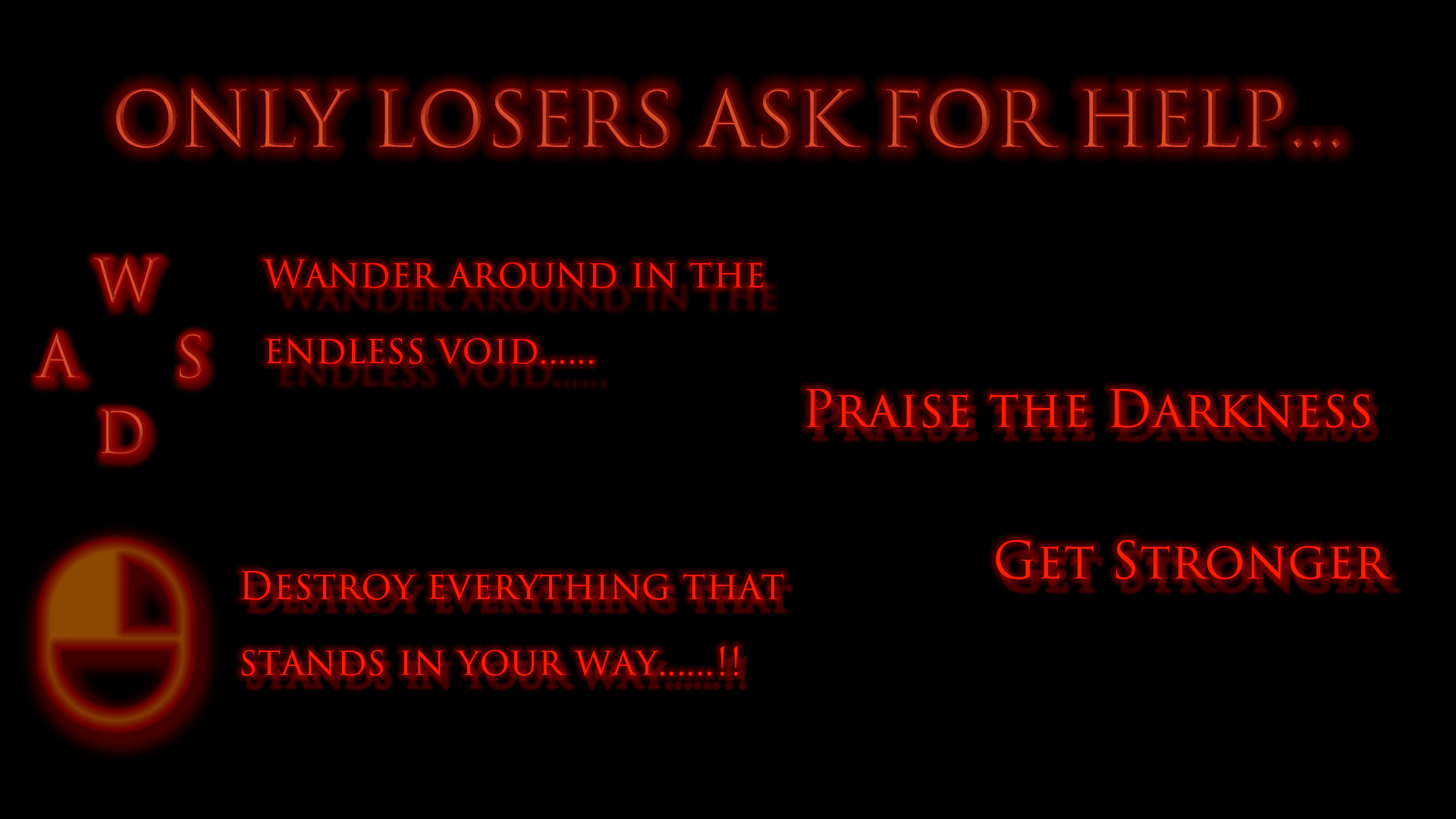
<style>
.page{position:relative;width:1456px;height:819px;background:#000000}
.page>*{position:absolute;margin:0}
.t1{font:75.8px "TrajanColor-Concept"}
.t2{font:56.9px/75.8px "TrajanColor-Concept"}
.t3{font:37.9px/75.8px "TrajanPro3-Regular";color:#ff1400}
.t4{font:50.6px/75.8px "TrajanPro3-Regular";color:#ff1400}
</style>
<div class="page">
<p class="t1" style="left:116px;top:88px;width:1224px;height:60px">ONLY LOSERS ASK FOR HELP...</p>
<p class="t2" style="left:36px;top:258px;width:166px;height:195px;text-align:center">W <br>A    S<br>D</p>
<p class="t3" style="left:262px;top:259px;width:501px;height:105px">Wander around in the <br>endless void......</p>
<p class="t4" style="left:806px;top:389px;width:586px;height:190px">Praise the Darkness<br><br>       Get Stronger</p>
<p class="t3" style="left:241px;top:571px;width:542px;height:105px">Destroy everything that <br>stands in your way......!!</p>
</div>
